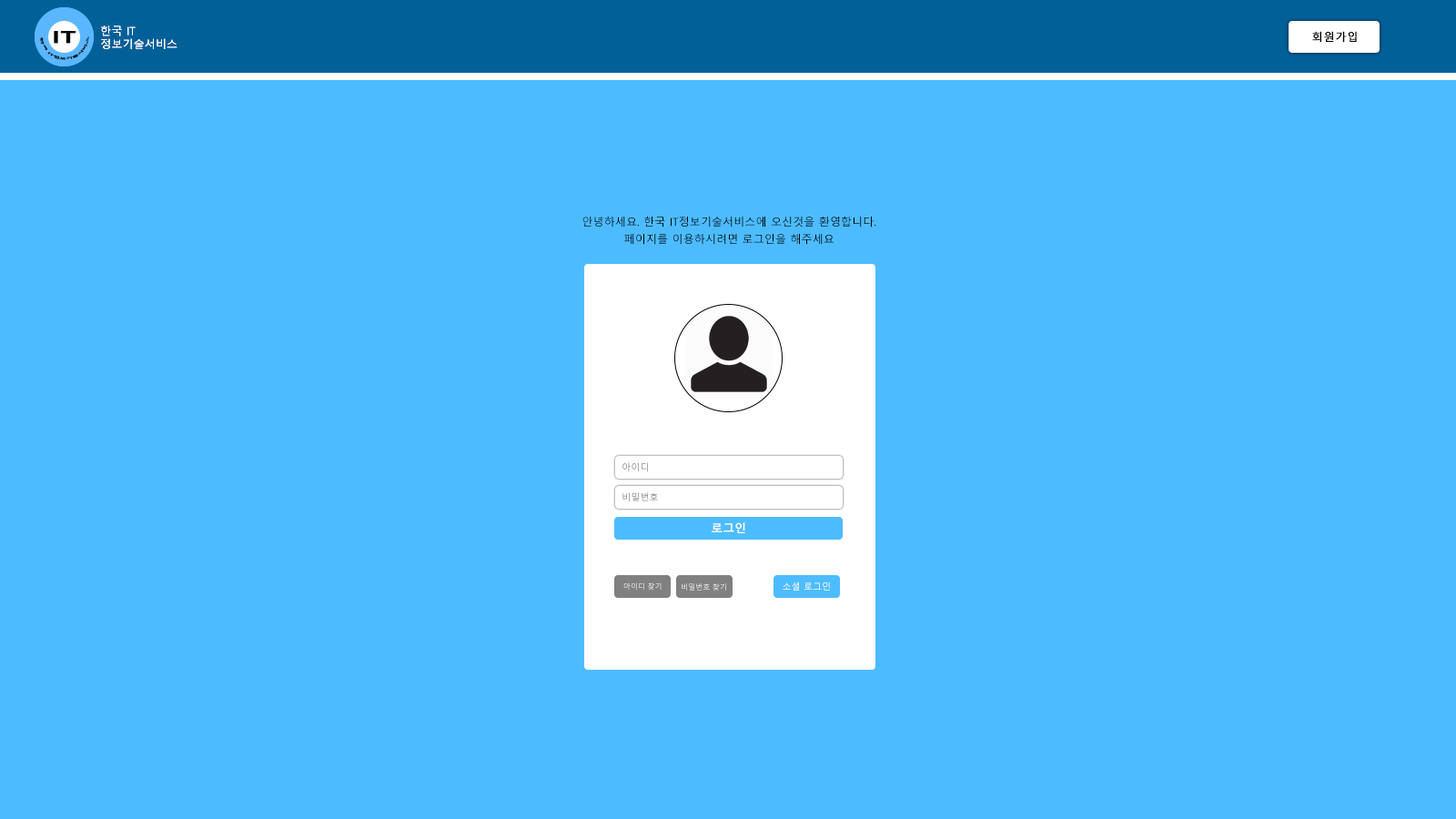
<style>
.page{position:relative;width:1456px;height:819px;background:#4dbcff}
.page>*{position:absolute;margin:0}
.t1{font:10.9px "MalgunGothic";letter-spacing:0.01em;color:#ffffff}
.t2{font:2.7px "MalgunGothicBold";letter-spacing:-0.01em;color:#000000;scale:1.6 1}
.t3{font:16.4px "MalgunGothicBold";letter-spacing:-0.01em;color:#000000;font-weight:bold;scale:1.6 1}
.t4{font:10.9px "MalgunGothic";letter-spacing:0.05em;color:#000000;font-weight:bold}
.t5{font:10.9px/17.3px "MalgunGothic";letter-spacing:0.01em;color:#000000}
.t6{font:9.1px "MalgunGothic";letter-spacing:0.01em}
.t7{font:9.1px "MalgunGothic";letter-spacing:0.01em;color:#828282}
.t8{font:11.8px "MalgunGothicBold";color:#ffffff}
.t9{font:9.1px "MalgunGothic";color:#ffffff}
.t10{font:7.3px "MalgunGothic"}
</style>
<div class="page">
<p class="t1" style="left:101px;top:25px;width:76px;height:24px">한국 IT<br>정보기술서비스</p>
<p class="t1" style="left:101px;top:25px;width:76px;height:24px">한국 IT<br>정보기술서비스</p>
<p class="t2" style="left:40px;top:36px;width:49px;height:24px;text-align:center">한국 IT정보기술서비스</p>
<p class="t2" style="left:40px;top:36px;width:49px;height:24px;text-align:center">한국 IT정보기술서비스</p>
<p class="t3" style="left:54px;top:31px;width:22px;height:13px">IT</p>
<p class="t3" style="left:54px;top:31px;width:22px;height:13px">IT</p>
<p class="t4" style="left:1312px;top:31px;width:45px;height:12px">회원가입</p>
<p class="t5" style="left:582px;top:216px;width:294px;height:29px;text-align:center">안녕하세요. 한국 IT정보기술서비스에 오신것을 환영합니다.<br>페이지를 이용하시려면 로그인을 해주세요</p>
<p class="t6" style="left:622px;top:462px;width:26px;height:9px">아이디</p>
<p class="t7" style="left:622px;top:492px;width:36px;height:9px">비밀번호</p>
<p class="t8" style="left:712px;top:522px;width:33px;height:11px">로그인</p>
<p class="t9" style="left:783px;top:581px;width:47px;height:10px">소셜 로그인</p>
<p class="t10" style="left:623px;top:582px;width:39px;height:8px">아이디 찾기</p>
<p class="t10" style="left:682px;top:583px;width:44px;height:8px">비밀번호 찾기</p>
</div>
